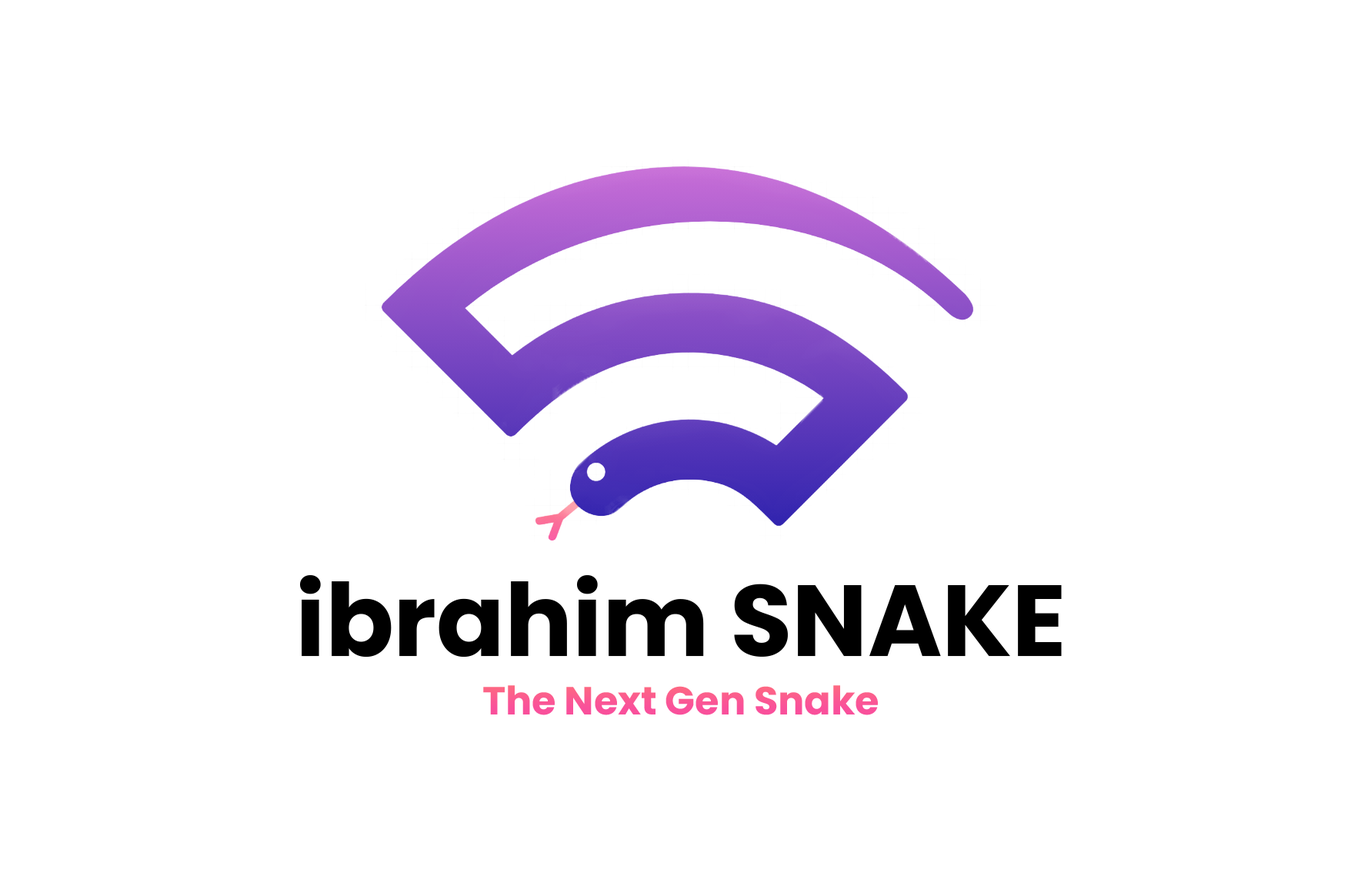
<style>
.page{position:relative;width:1371px;height:870px;background:#ffffff}
.page>*{position:absolute;margin:0}
.t1{font:100.8px "Poppins-Bold";color:#000000}
.t2{font:39.2px "Poppins-Bold";color:#fa5694}
</style>
<div class="page">
<p class="t1" style="left:300px;top:575px;width:762px;height:82px">ibrahim SNAKE</p>
<p class="t2" style="left:483px;top:685px;width:395px;height:30px">The Next Gen Snake</p>
</div>
